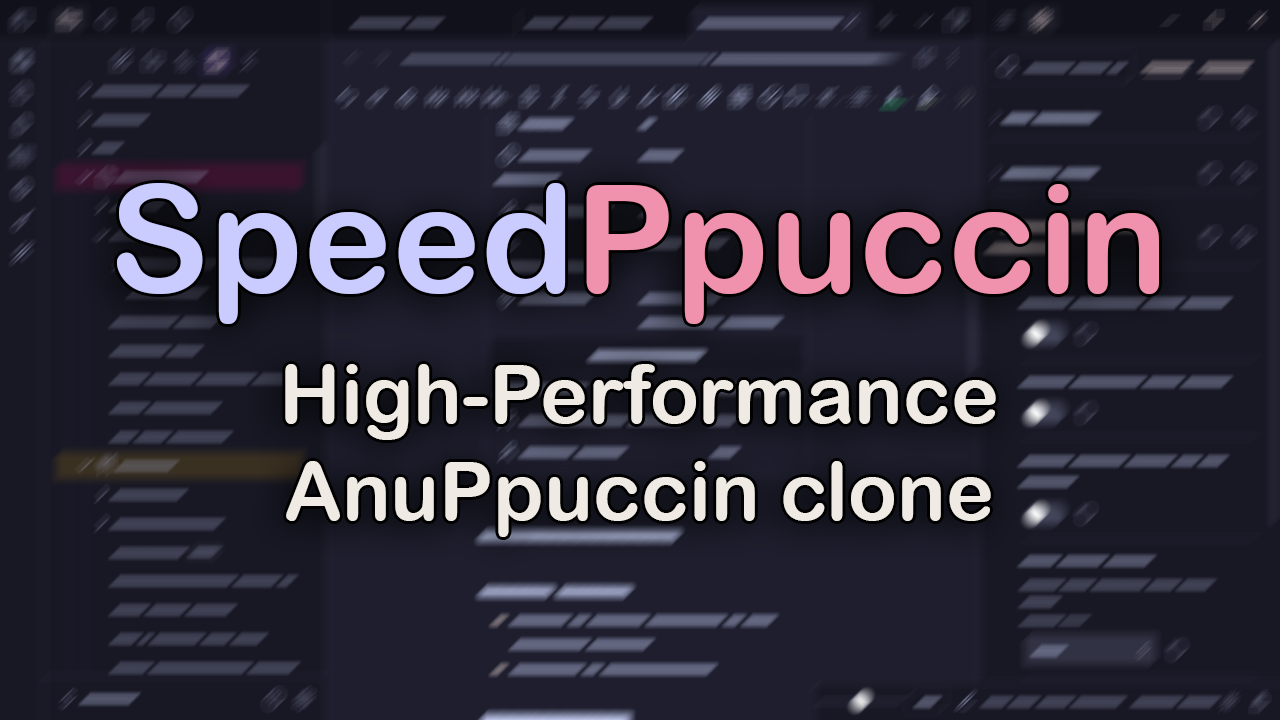
<style>
.page{position:relative;width:1280px;height:720px}
.page>*{position:absolute;margin:0}
.t1{font:81px "ArialRoundedMTBold";color:#efebe4}
.t2{font:150px "ArialRoundedMTBold";color:#cacbff}
.t3{font:150px "ArialRoundedMTBold";color:#f092ae}
</style>
<div class="page">
<p class="t1" style="left:116px;top:183px;width:1043px;height:354px;text-align:center"><span class="t2">Speed</span><span class="t3">Ppuccin<br> </span><br>High-Performance<br>AnuPpuccin clone</p>
</div>
